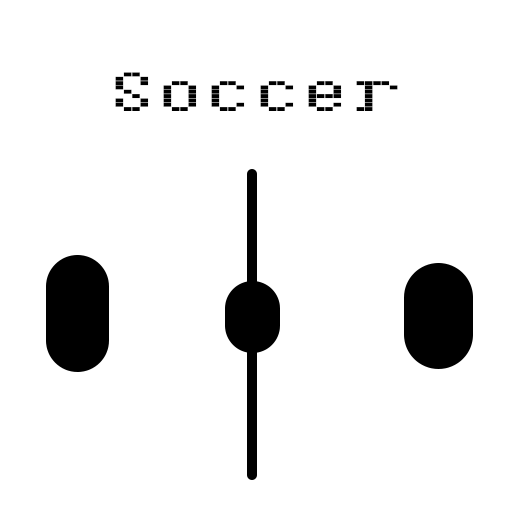
<style>
.page{position:relative;width:512px;height:512px;background:#ffffff}
.page>*{position:absolute;margin:0}
.t1{font:55px "Wednesday";letter-spacing:0.1em;color:#000000;scale:1.92 1}
</style>
<div class="page">
<p class="t1" style="left:115px;top:72px;width:283px;height:39px">Soccer</p>
</div>
